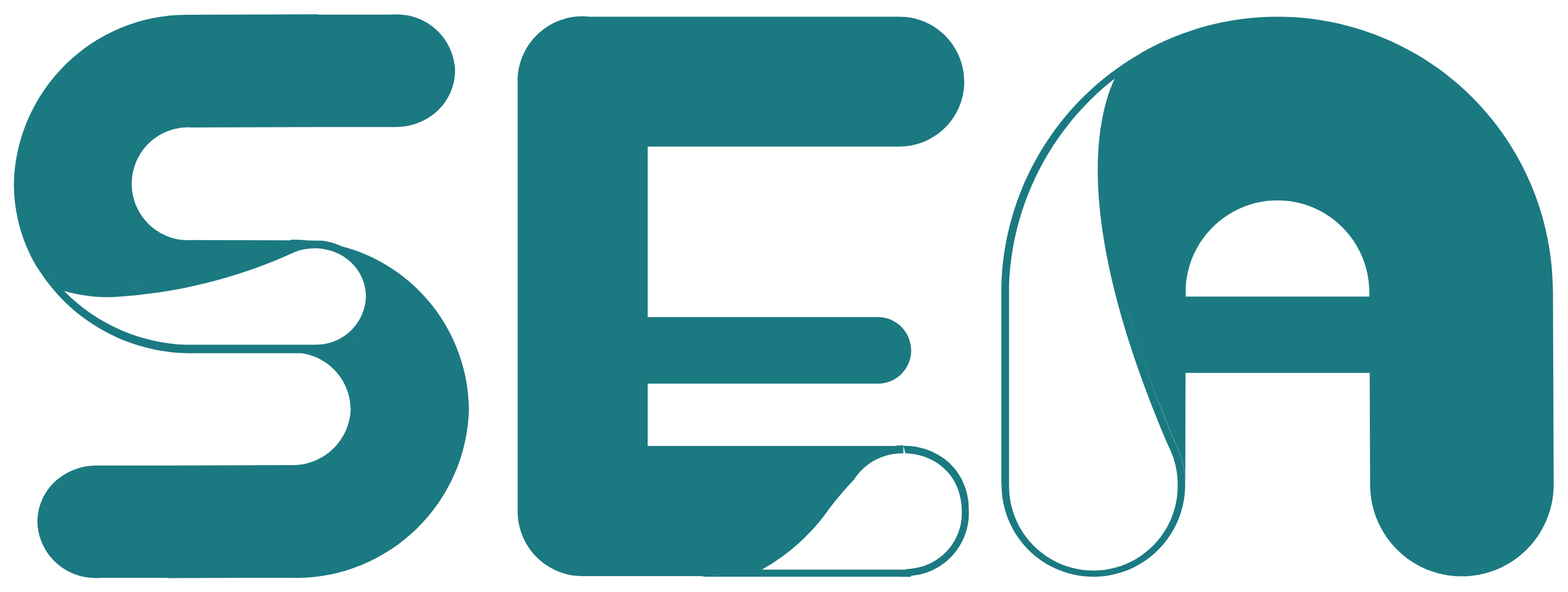
<style>
.page{position:relative;width:1568px;height:592px;background:#ffffff}
.page>*{position:absolute;margin:0}
.t1{font:769.1px "AquaphonicDamp";color:#1b7981}
.t2{font:833.8px "AquaphonicDamp";color:#1b7981}
</style>
<div class="page">
<p class="t1" style="left:14px;top:14px;width:1540px;height:564px"><span class="t2">S</span>EA</p>
</div>
